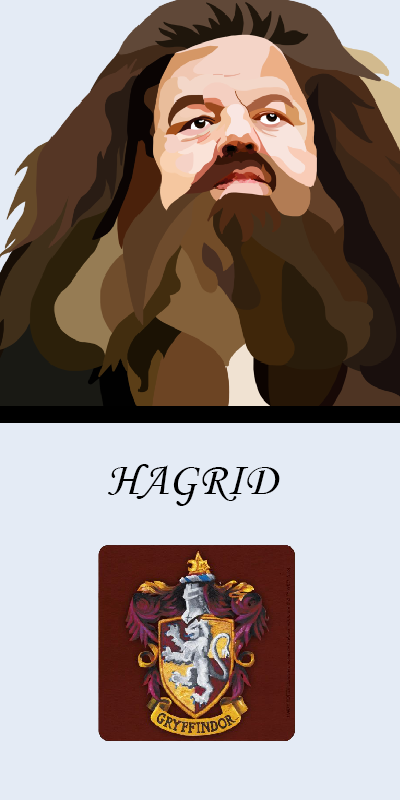
<style>
.page{position:relative;width:400px;height:800px;background:#e4ebf5}
.page>*{position:absolute;margin:0}
.t1{font:47px "MonotypeCorsiva";color:#000000}
</style>
<div class="page">
<p class="t1" style="left:108px;top:464px;width:172px;height:42px">HAGRID</p>
</div>
